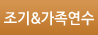
<style>
.page{position:relative;width:98px;height:35px}
.page>*{position:absolute;margin:0}
.t1{font:15px "NanumGothicBold";color:#ffffff;scale:0.95 1}
</style>
<div class="page">
<p class="t1" style="left:4px;top:11px;width:90px;height:15px">조기&amp;가족연수</p>
</div>
